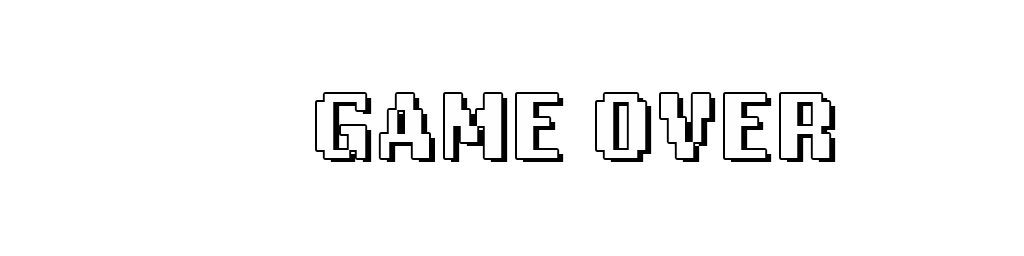
<style>
.page{position:relative;width:1024px;height:256px;background:#ffffff}
.page>*{position:absolute;margin:0}
.t1{font:96px "LoRes12OT-Bold";color:#fefefe}
</style>
<div class="page">
<p class="t1" style="left:317px;top:94px;width:513px;height:64px">GAME OVER</p>
</div>
